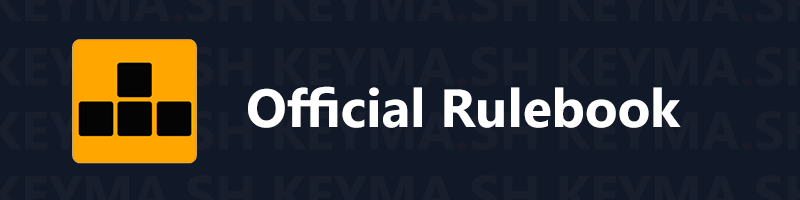
<style>
.page{position:relative;width:800px;height:200px;background:#111827}
.page>*{position:absolute;margin:0}
.t1{font:53.5px "SegoeUI-Bold";color:#ffffff}
</style>
<div class="page">
<p class="t1" style="left:248px;top:86px;width:433px;height:42px">Official Rulebook</p>
</div>
